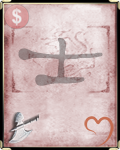
<style>
.page{position:relative;width:120px;height:150px}
.page>*{position:absolute;margin:0}
.t1{font:100px "FZGLJW--GB1-0";color:#988787}
</style>
<div class="page">
<p class="t1" style="left:18px;top:37px;width:85px;height:49px">士</p>
</div>
